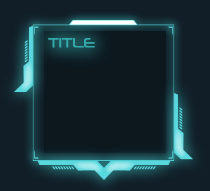
<style>
.page{position:relative;width:210px;height:191px;background:#0c171e}
.page>*{position:absolute;margin:0}
.t1{font:12.9px "Neuropol-Regular";color:#33a9a9}
</style>
<div class="page">
<p class="t1" style="left:48px;top:38px;width:47px;height:10px">TITLE</p>
</div>
